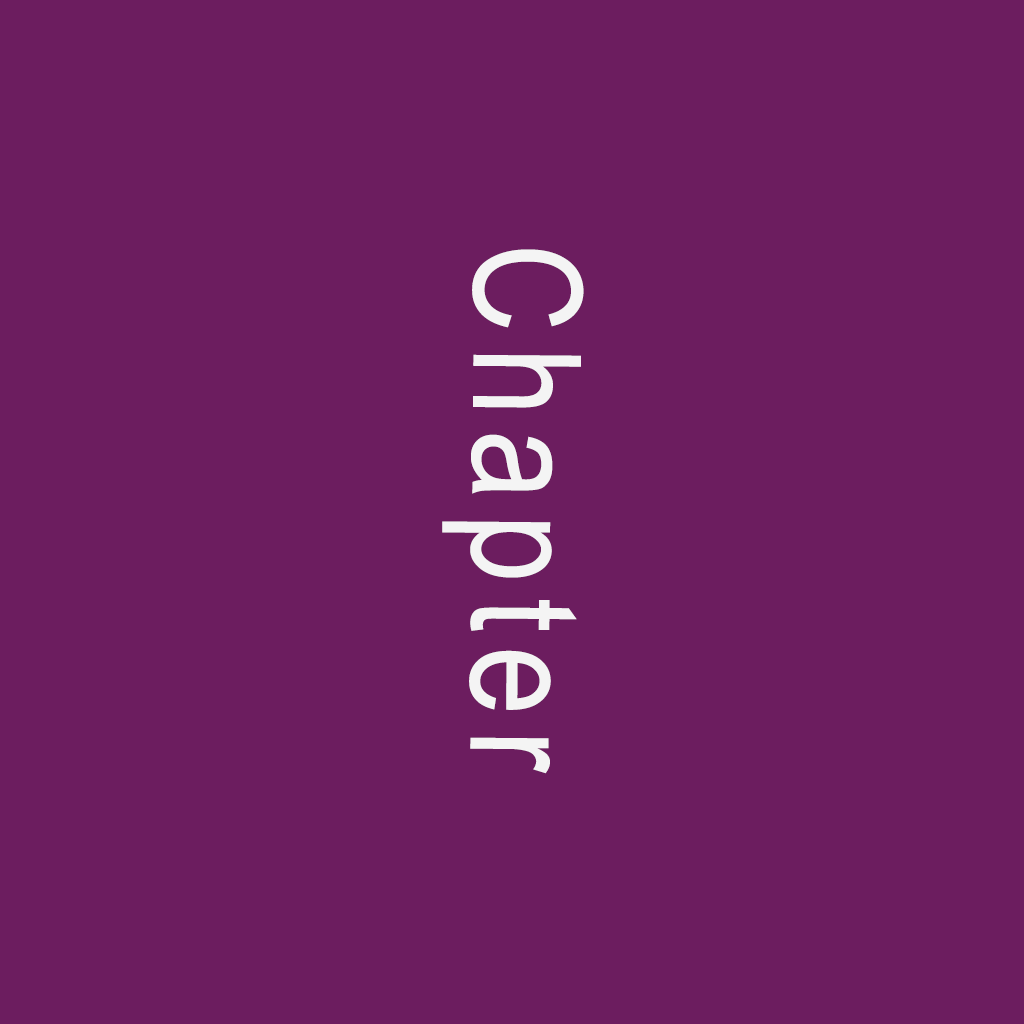
<style>
.page{position:relative;width:1024px;height:1024px;background:#6c1d5f}
.page>*{position:absolute;margin:0}
.t1{font:150px "ArialNarrow";letter-spacing:0.1em;color:#f4f4f4}
</style>
<div class="page">
<p class="t1" style="left:442px;top:249px;width:142px;height:525px;rotate:90deg">Chapter</p>
</div>
